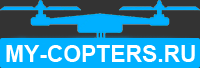
<style>
.page{position:relative;width:200px;height:68px;background:#00b0ff}
.page>*{position:absolute;margin:0}
.t1{font:23px "Arial-BoldMT";letter-spacing:-0.005em;color:#ffffff}
</style>
<div class="page">
<p class="t1" style="left:6px;top:45px;width:189px;height:17px">MY-COPTERS.RU</p>
</div>
